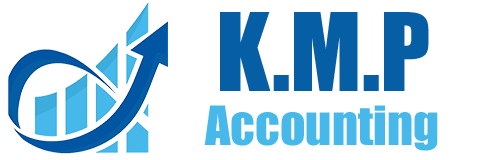
<style>
.page{position:relative;width:500px;height:160px;background:#ffffff}
.page>*{position:absolute;margin:0}
.t1{font:100px "Impact";color:#065ea4}
.t2{font:50px "Impact";color:#46b8ea}
</style>
<div class="page">
<p class="t1" style="left:220px;top:12px;width:209px;height:79px">K.M.P</p>
<p class="t2" style="left:204px;top:105px;width:234px;height:46px">Accounting</p>
</div>
